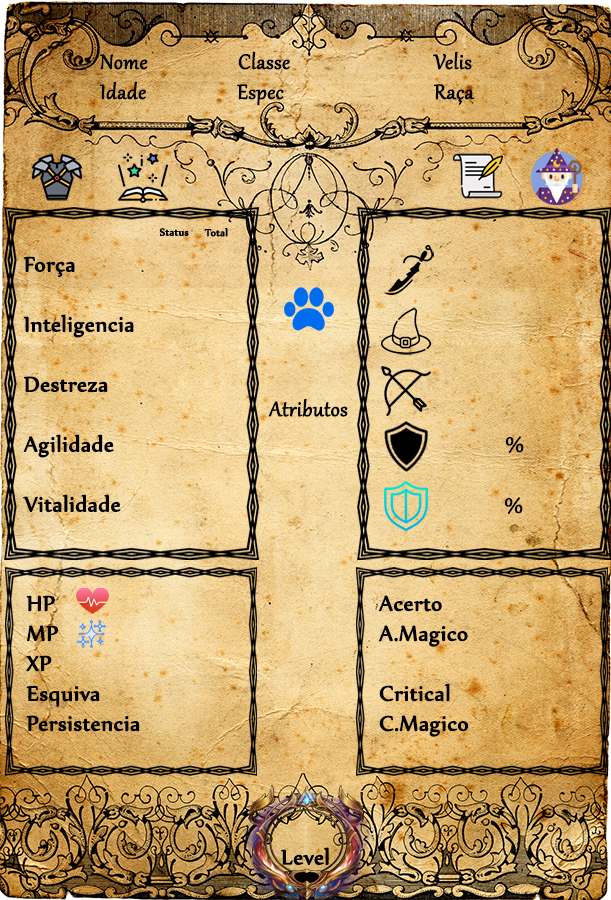
<style>
.page{position:relative;width:611px;height:900px}
.page>*{position:absolute;margin:0}
.t1{font:25px "Gabriola";color:#000000;font-weight:bold}
.t2{font:25px "Nyala-Regular";color:#000000;font-weight:bold}
</style>
<div class="page">
<p class="t1" style="left:99px;top:51px;width:376px;height:55px">Nome        Classe             Velis<br>Idade                  Espec       Raça</p>
<p class="t2" style="left:23px;top:256px;width:111px;height:257px">Força<br><br>Inteligencia<br><br>Destreza<br><br>Agilidade<br><br>Vitalidade</p>
<p class="t1" style="left:268px;top:399px;width:80px;height:18px">Atributos</p>
<p class="t1" style="left:505px;top:436px;width:19px;height:18px">%</p>
<p class="t1" style="left:504px;top:497px;width:19px;height:18px">%</p>
<p class="t2" style="left:26px;top:595px;width:114px;height:137px">HP <br>MP<br>XP   <br>Esquiva<br>Persistencia</p>
<p class="t2" style="left:379px;top:595px;width:90px;height:142px">Acerto<br>A.Magico<br><br>Critical<br>C.Magico</p>
<p class="t2" style="left:281px;top:847px;width:48px;height:18px">Level</p>
</div>
